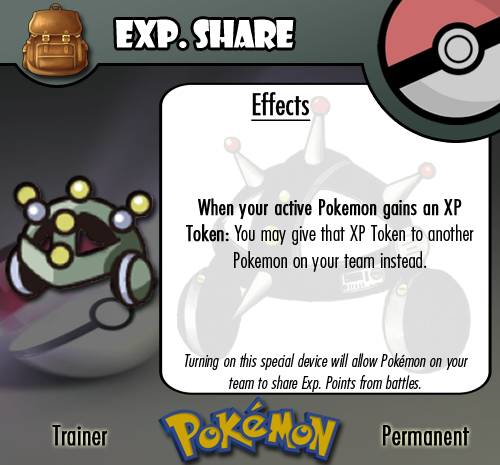
<style>
.page{position:relative;width:500px;height:465px;background:#ffffff}
.page>*{position:absolute;margin:0}
.t1{font:36.7px "ShowcardGothic-Reg";letter-spacing:-0.025em;color:#ffffff;scale:0.91 1}
.t2{font:22.2px "FuturaCondensedBQ-Light";color:#010101}
.t3{font:27.8px "FuturaCondensedBQ-Light";color:#010101;font-weight:bold}
.t4{font:30.6px "FuturaCondensedBQ-Light";color:#010101;font-weight:bold;text-decoration:underline}
.t5{font:22.2px "FuturaCondensedBQ-Light";color:#010101;font-weight:bold}
.t6{font:18.1px "FuturaCondensedBQ-Light";color:#010101;font-style:italic}
</style>
<div class="page">
<p class="t1" style="left:116px;top:19px;width:178px;height:31px">EXp. Share</p>
<p class="t2" style="left:186px;top:92px;width:288px;height:180px"><span class="t3">  </span><span class="t4">Effects<br><br><br><br><br><br></span><span class="t5">When your active Pokemon gains an XP Token: </span>You may give that XP Token to another Pokemon on your team instead.</p>
<p class="t6" style="left:185px;top:353px;width:283px;height:39px;text-align:center">Turning on this special device will allow Pokémon on your team to share Exp. Points from battles.</p>
<p class="t3" style="left:52px;top:425px;width:55px;height:21px">Trainer</p>
<p class="t3" style="left:383px;top:425px;width:86px;height:21px">Permanent</p>
</div>
